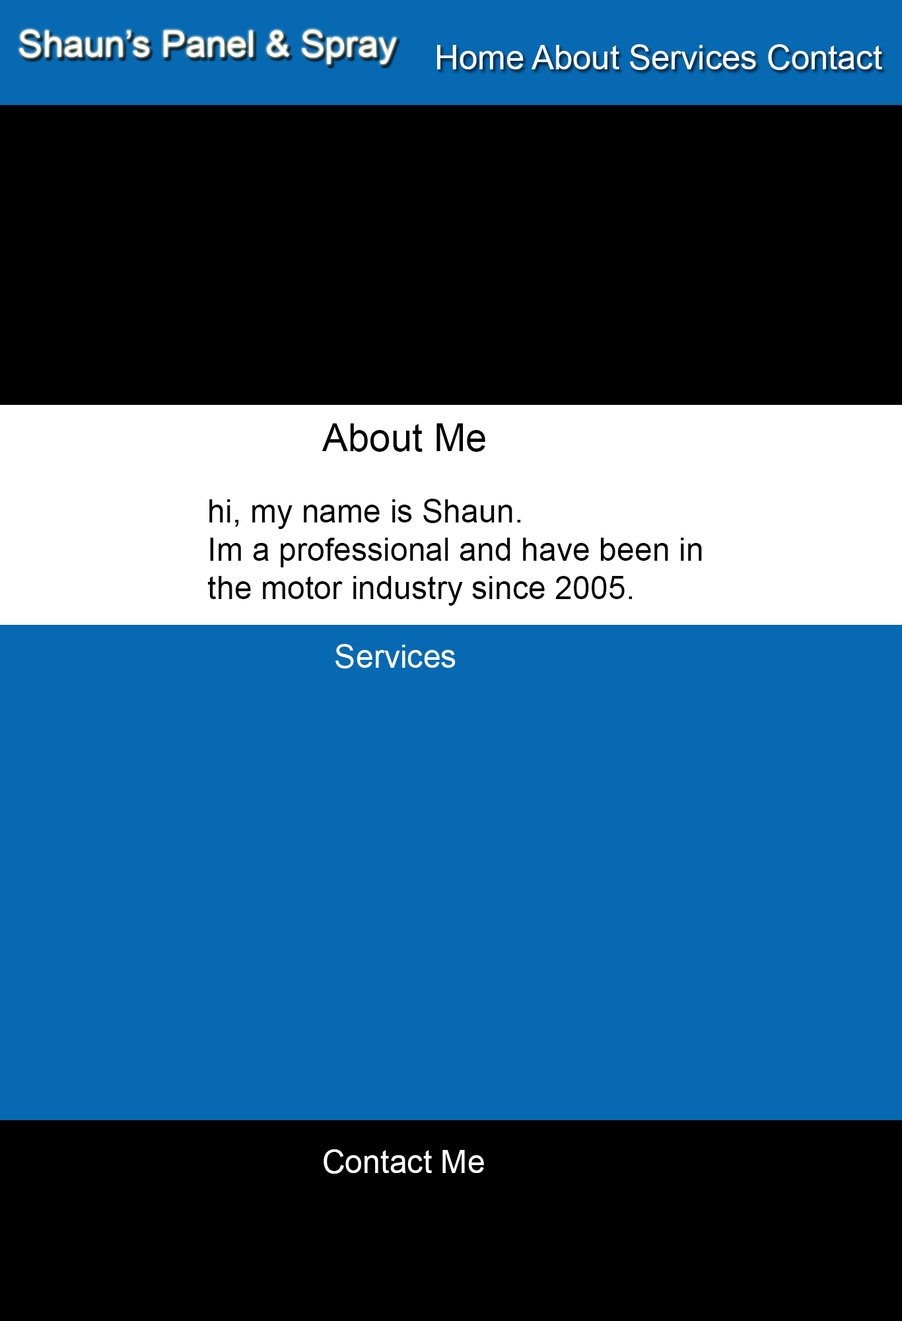
<style>
.page{position:relative;width:902px;height:1321px;background:#0669b2}
.page>*{position:absolute;margin:0}
.t1{font:36.9px "ArialMT";color:#ffffff}
.t2{font:33.6px "ArialMT";color:#ffffff}
.t3{font:38.6px "ArialMT";color:#000000}
.t4{font:31.9px "ArialMT";color:#000000}
.t5{font:31.9px "ArialMT";color:#ffffff}
</style>
<div class="page">
<p class="t1" style="left:19px;top:30px;width:378px;height:34px">Shaun’s Panel &amp; Spray</p>
<p class="t2" style="left:437px;top:44px;width:446px;height:26px">Home About Services Contact</p>
<p class="t3" style="left:322px;top:423px;width:164px;height:29px">About Me</p>
<p class="t4" style="left:207px;top:499px;width:495px;height:107px">hi, my name is Shaun.<br>Im a professional and have been in <br>the motor industry since 2005.</p>
<p class="t5" style="left:336px;top:644px;width:120px;height:25px">Services</p>
<p class="t5" style="left:324px;top:1150px;width:160px;height:24px">Contact Me</p>
</div>
